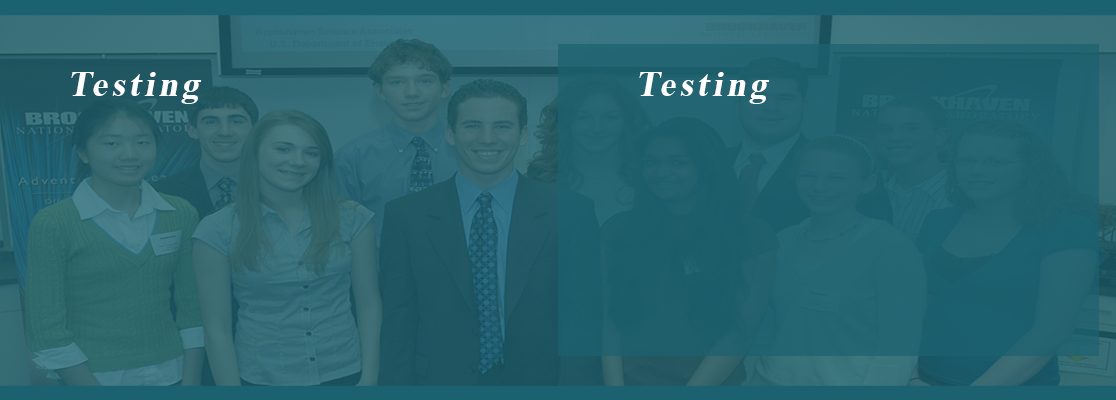
<style>
.page{position:relative;width:1116px;height:400px}
.page>*{position:absolute;margin:0}
.t1{font:36px "TimesNewRomanPS-BoldMT";letter-spacing:0.1em;color:#ffffff;font-style:italic}
</style>
<div class="page">
<p class="t1" style="left:71px;top:72px;width:131px;height:32px">Testing</p>
<p class="t1" style="left:639px;top:72px;width:131px;height:32px">Testing</p>
</div>
